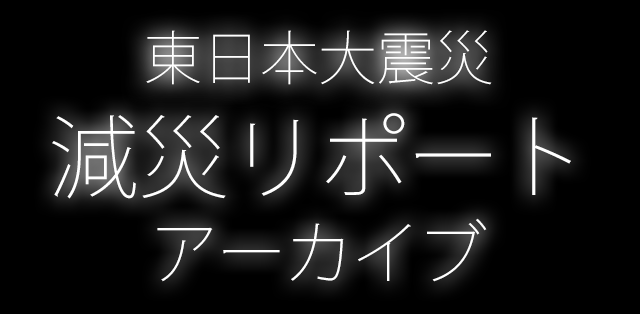
<style>
.page{position:relative;width:640px;height:314px;background:#000000}
.page>*{position:absolute;margin:0}
.t1{font:58.3px "KozGoPr6N-ExtraLight";color:#ffffff}
.t2{font:90px/87px "KozGoPr6N-ExtraLight";color:#ffffff}
.t3{font:67.1px/87px "KozGoPr6N-ExtraLight";color:#ffffff}
</style>
<div class="page">
<p class="t1" style="left:146px;top:30px;width:346px;height:55px">東日本大震災</p>
<p class="t2" style="left:52px;top:113px;width:519px;height:169px;text-align:center">減災リポート<br><span class="t3">アーカイブ</span></p>
</div>
